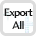
<style>
.page{position:relative;width:36px;height:36px;background:#ffffff}
.page>*{position:absolute;margin:0}
.t1{font:10.7px "AmiraParadiso";letter-spacing:-0.05em;color:#000000}
</style>
<div class="page">
<p class="t1" style="left:4px;top:8px;width:29px;height:21px;text-align:center;opacity:0.96">Export All</p>
</div>
